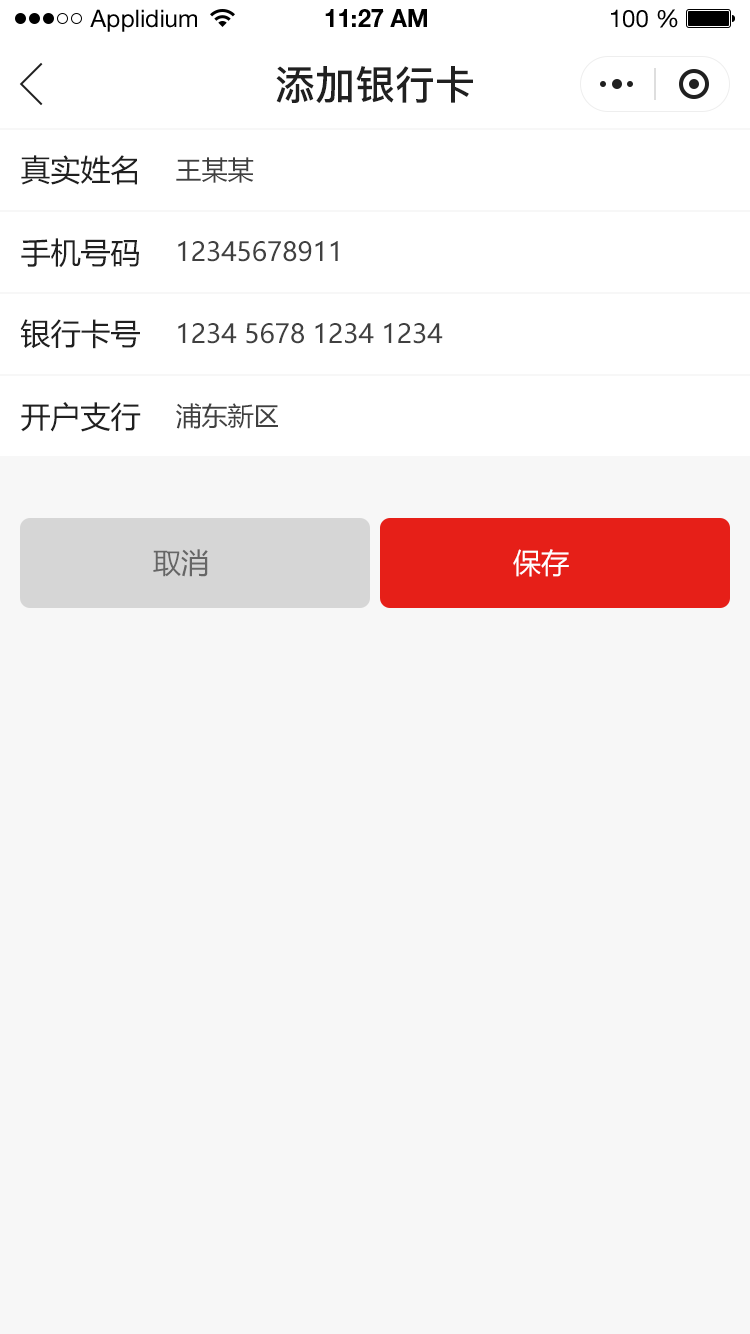
<style>
.page{position:relative;width:750px;height:1334px;background:#f7f7f7}
.page>*{position:absolute;margin:0}
.t1{font:24px "HelveticaNeueLTStd-Roman";color:#000000}
.t2{font:24px "HelveticaNeueLTStd-Bd";color:#000000}
.t3{font:40px "PingFang-SC-Bold";color:#202020;text-transform:uppercase}
.t4{font:30px "MicrosoftYaHei";color:#202020;text-transform:uppercase}
.t5{font:26px "MicrosoftYaHei";color:#404040;text-transform:uppercase}
.t6{font:28px "MicrosoftYaHei";color:#666666;text-transform:uppercase}
.t7{font:28px "MicrosoftYaHei";color:#ffffff;text-transform:uppercase}
</style>
<div class="page">
<p class="t1" style="left:90px;top:9px;width:107px;height:23px">Applidium</p>
<p class="t2" style="left:325px;top:9px;width:102px;height:18px">11:27 AM</p>
<p class="t1" style="left:611px;top:9px;width:67px;height:19px">100 %</p>
<p class="t3" style="left:276px;top:66px;width:197px;height:37px">添加银行卡</p>
<p class="t4" style="left:21px;top:155px;width:116px;height:30px">真实姓名</p>
<p class="t5" style="left:176px;top:157px;width:78px;height:26px">王某某</p>
<p class="t4" style="left:21px;top:238px;width:118px;height:30px">手机号码</p>
<p class="t5" style="left:178px;top:241px;width:160px;height:21px">12345678911</p>
<p class="t4" style="left:20px;top:319px;width:120px;height:30px">银行卡号</p>
<p class="t5" style="left:178px;top:323px;width:265px;height:21px">1234 5678 1234 1234</p>
<p class="t4" style="left:21px;top:402px;width:120px;height:30px">开户支行</p>
<p class="t5" style="left:176px;top:403px;width:102px;height:26px">浦东新区</p>
<p class="t6" style="left:153px;top:549px;width:55px;height:28px">取消</p>
<p class="t7" style="left:513px;top:549px;width:56px;height:28px">保存</p>
</div>
